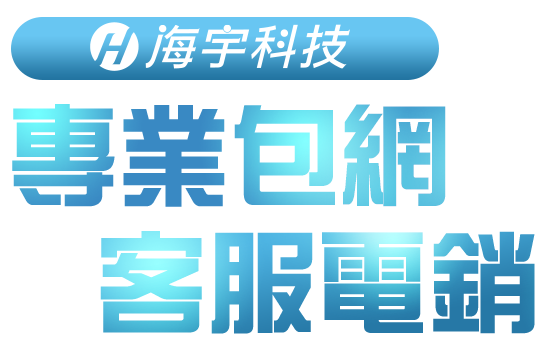
<style>
.page{position:relative;width:538px;height:344px;background:#ffffff}
.page>*{position:absolute;margin:0}
.t1{font:111.8px "DFZongYi-Bd-HK-BF";letter-spacing:-0.01em}
</style>
<div class="page">
<p class="t1" style="left:12px;top:104px;width:434px;height:103px">專業包網</p>
<p class="t1" style="left:100px;top:231px;width:435px;height:103px">客服電銷</p>
</div>
